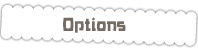
<style>
.page{position:relative;width:198px;height:48px;background:#ffffff}
.page>*{position:absolute;margin:0}
.t1{font:16px "AB-karuta_bold";color:#736b64}
</style>
<div class="page">
<p class="t1" style="left:63px;top:17px;width:63px;height:16px">Options</p>
</div>
